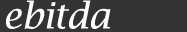
<style>
.page{position:relative;width:187px;height:32px;background:#333333}
.page>*{position:absolute;margin:0}
.t1{font:36px "LucidaBright-Italic";color:#fffefe}
</style>
<div class="page">
<p class="t1" style="left:6px;top:0px;width:105px;height:29px">ebitda</p>
</div>
